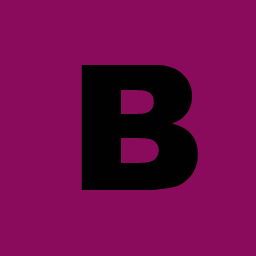
<style>
.page{position:relative;width:256px;height:256px;background:#8a0a5b}
.page>*{position:absolute;margin:0}
.t1{font:174.7px "Arial-Black";color:#010101}
</style>
<div class="page">
<p class="t1" style="left:81px;top:65px;width:117px;height:125px">B</p>
</div>
